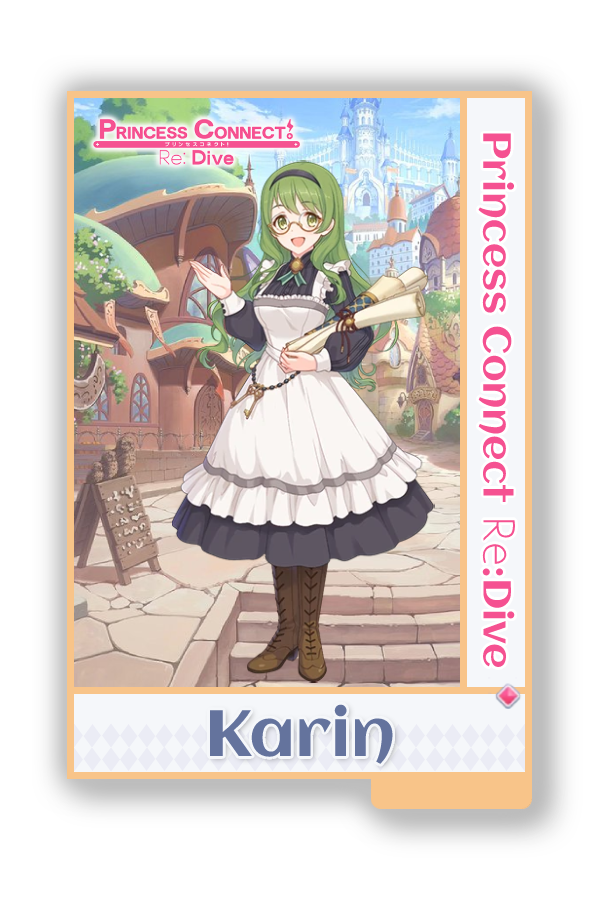
<style>
.page{position:relative;width:600px;height:900px;background:#ffffff}
.page>*{position:absolute;margin:0}
.t1{font:39px "Aclonica-Regular";color:#f55191}
.t2{font:39px "AaarghNormal";color:#f55191}
.t3{font:65px "Aclonica-Regular";color:#64739d}
</style>
<div class="page">
<p class="t1" style="left:478px;top:133px;width:38px;height:534px;rotate:90deg">Princess Connect <span class="t2">Re</span>:Dive</p>
<p class="t3" style="left:210px;top:704px;width:183px;height:60px">Karin</p>
</div>
